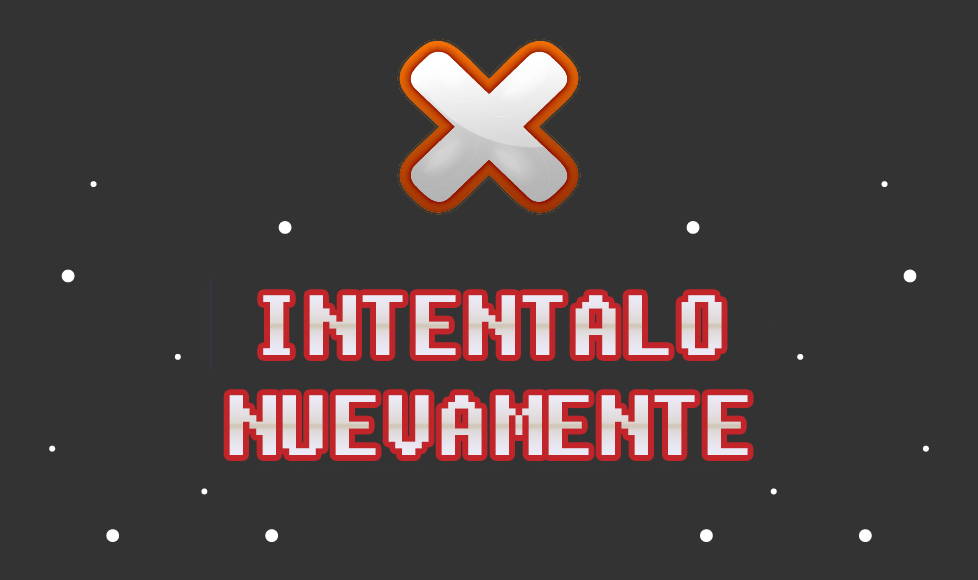
<style>
.page{position:relative;width:978px;height:580px;background:#333333}
.page>*{position:absolute;margin:0}
.t1{font:85px "Fixedsys";color:#e6e4f3}
</style>
<div class="page">
<p class="t1" style="left:263px;top:295px;width:459px;height:60px">INTENTALO</p>
<p class="t1" style="left:229px;top:395px;width:519px;height:60px">NUEVAMENTE</p>
</div>
